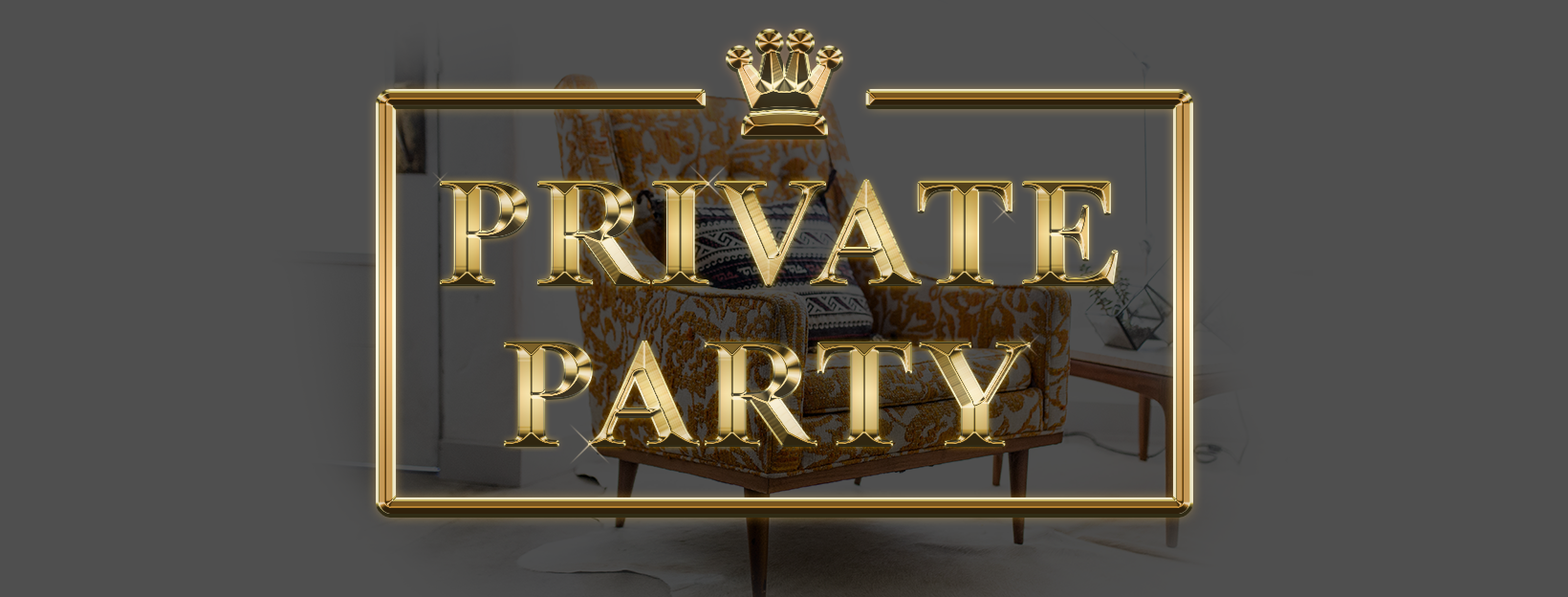
<style>
.page{position:relative;width:1568px;height:597px;background:#4f4f4f}
.page>*{position:absolute;margin:0}
.t1{font:153px "TimesNewRomanPS-BoldMT";letter-spacing:0.03em;text-transform:uppercase}
</style>
<div class="page">
<p class="t1" style="left:442px;top:181px;width:675px;height:105px">Private</p>
<p class="t1" style="left:442px;top:181px;width:675px;height:105px">Private</p>
<p class="t1" style="left:506px;top:341px;width:523px;height:104px">party</p>
<p class="t1" style="left:506px;top:341px;width:523px;height:104px">Party</p>
</div>
